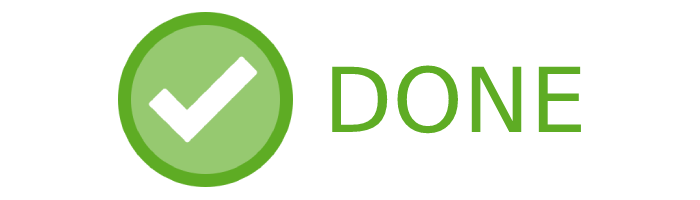
<style>
.page{position:relative;width:700px;height:200px;background:#ffffff}
.page>*{position:absolute;margin:0}
.t1{font:89.6px "DejaVuSans";color:#5eac24}
</style>
<div class="page">
<p class="t1" style="left:332px;top:65px;width:249px;height:69px">DONE</p>
</div>
